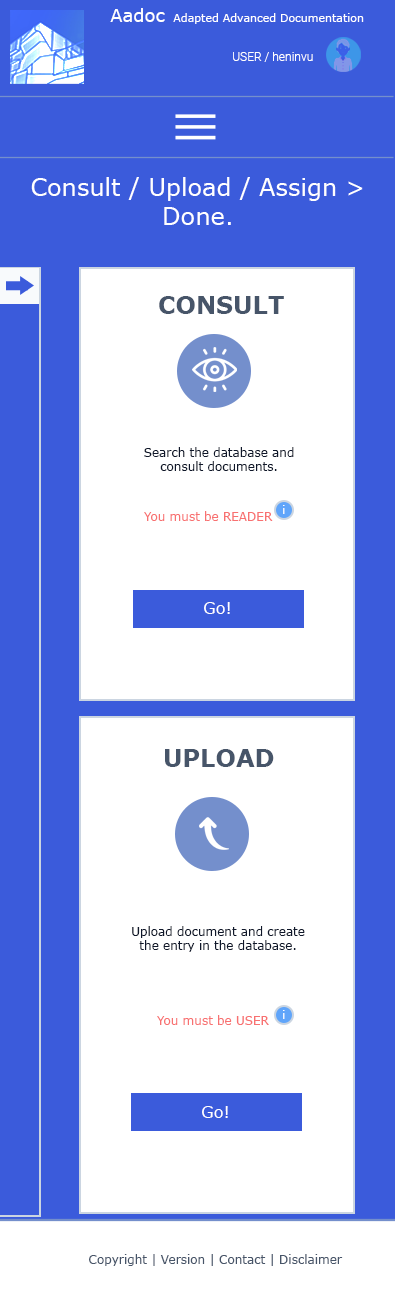
<style>
.page{position:relative;width:395px;height:1293px;background:#ffffff}
.page>*{position:absolute;margin:0}
.t1{font:18px "Verdana";color:#ffffff}
.t2{font:11px "Verdana";color:#ffffff}
.t3{font:12px "Roboto-Light";color:#ffffff}
.t4{font:24px "Verdana";color:#ffffff}
.t5{font:24px "Verdana-Bold";color:#475569}
.t6{font:12px "Verdana";color:#0f172a}
.t7{font:12px "Verdana";color:#f87171}
.t8{font:16px "Verdana";color:#ffffff}
.t9{font:12px "Verdana";color:#475569}
</style>
<div class="page">
<p class="t1" style="left:110px;top:8px;width:55px;height:14px">Aadoc</p>
<p class="t2" style="left:173px;top:13px;width:191px;height:11px">Adapted Advanced Documentation</p>
<p class="t3" style="left:233px;top:52px;width:80px;height:10px">USER / heninvu</p>
<p class="t4" style="left:31px;top:177px;width:332px;height:48px;text-align:center">Consult / Upload / Assign &gt;<br>Done.</p>
<p class="t5" style="left:159px;top:296px;width:125px;height:18px">CONSULT</p>
<p class="t6" style="left:144px;top:447px;width:150px;height:24px;text-align:center">Search the database and consult documents.</p>
<p class="t2" style="left:283px;top:505px;width:2px;height:9px">i</p>
<p class="t7" style="left:144px;top:511px;width:129px;height:10px">You must be READER</p>
<p class="t8" style="left:204px;top:602px;width:26px;height:12px">Go!</p>
<p class="t5" style="left:165px;top:749px;width:109px;height:18px">UPLOAD</p>
<p class="t6" style="left:132px;top:926px;width:173px;height:26px;text-align:center">Upload document and create the entry in the database.</p>
<p class="t2" style="left:283px;top:1010px;width:2px;height:9px">i</p>
<p class="t7" style="left:157px;top:1015px;width:112px;height:10px">You must be USER</p>
<p class="t8" style="left:202px;top:1106px;width:26px;height:12px">Go!</p>
<p class="t9" style="left:89px;top:1254px;width:254px;height:12px">Copyright | Version | Contact | Disclaimer</p>
</div>
